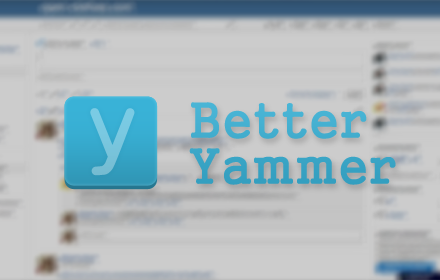
<style>
.page{position:relative;width:440px;height:280px}
.page>*{position:absolute;margin:0}
.t1{font:47.8px/45.9px "Gungsuh";color:#38aed2;font-weight:bold}
</style>
<div class="page">
<p class="t1" style="left:189px;top:102px;width:207px;height:83px">Better<br>Yammer</p>
</div>
